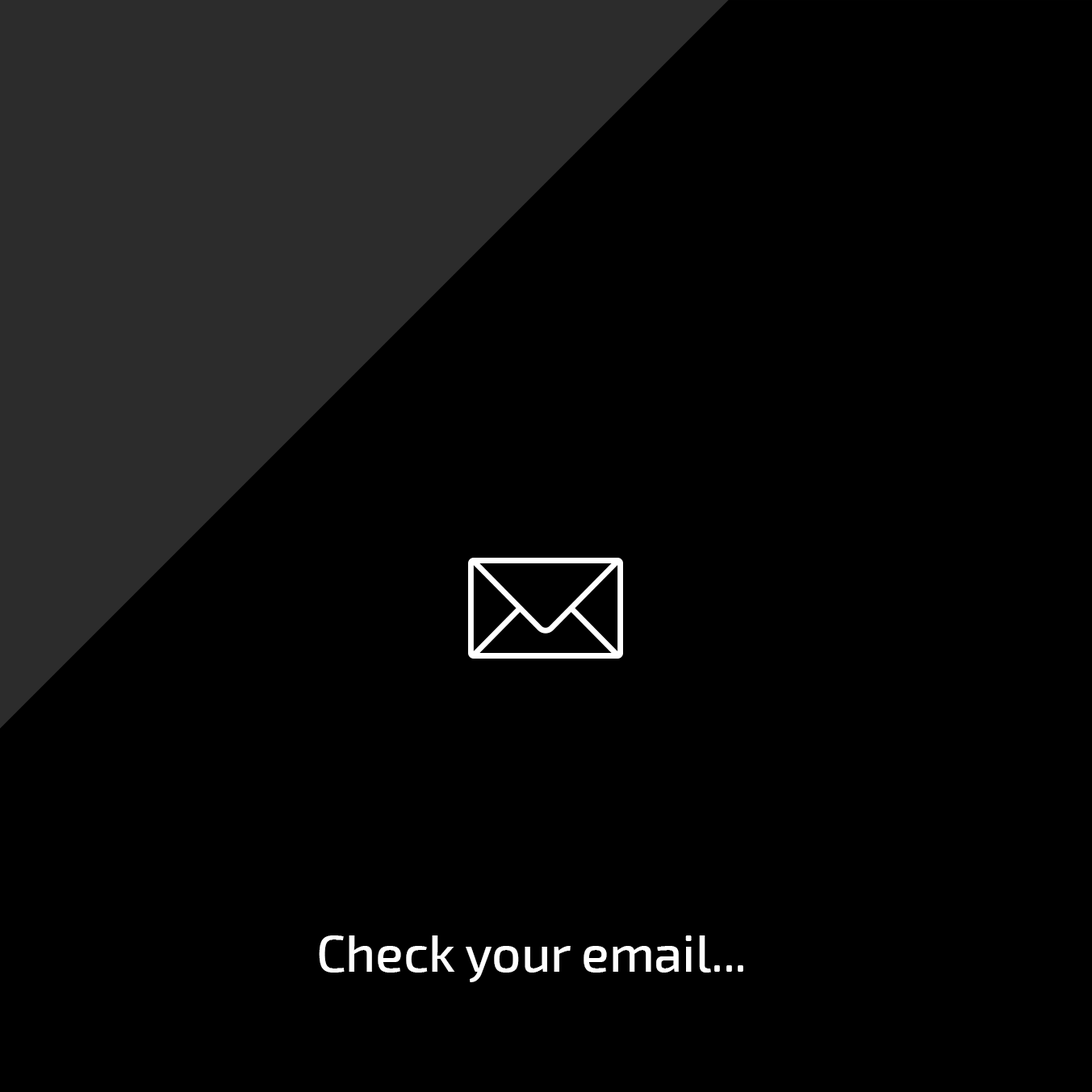
<style>
.page{position:relative;width:1092px;height:1092px;background:#000000}
.page>*{position:absolute;margin:0}
.t1{font:51.3px "Exo2-Medium";color:#ffffff}
</style>
<div class="page">
<p class="t1" style="left:319px;top:935px;width:424px;height:47px">Check your email...</p>
</div>
